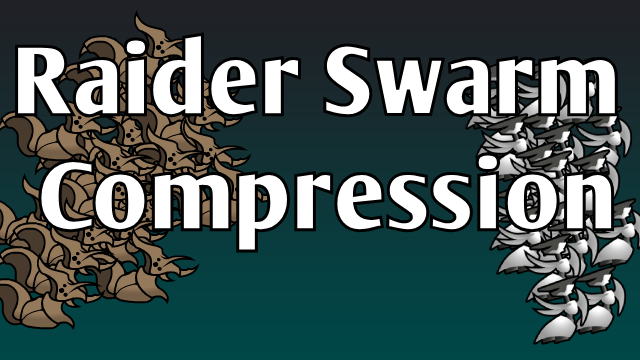
<style>
.page{position:relative;width:640px;height:360px}
.page>*{position:absolute;margin:0}
.t1{font:96px "ArmWrestler-Bold";color:#ffffff}
</style>
<div class="page">
<p class="t1" style="left:13px;top:31px;width:607px;height:224px;text-align:center">Raider Swarm <br>Compression</p>
</div>
